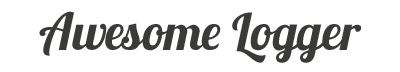
<style>
.page{position:relative;width:400px;height:72px;background:#ffffff}
.page>*{position:absolute;margin:0}
.t1{font:50.8px "Lobster1.3";letter-spacing:-0.005em;color:#3a3a38}
</style>
<div class="page">
<p class="t1" style="left:39px;top:11px;width:323px;height:52px">Awesome Logger</p>
</div>
